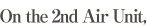
<style>
.page{position:relative;width:147px;height:27px;background:#ffffff}
.page>*{position:absolute;margin:0}
.t1{font:18px "RyuminPro-ExBold";letter-spacing:-0.08em;color:#4c4843}
</style>
<div class="page">
<p class="t1" style="left:0px;top:9px;width:147px;height:16px">On the 2nd Air Unit,</p>
</div>
